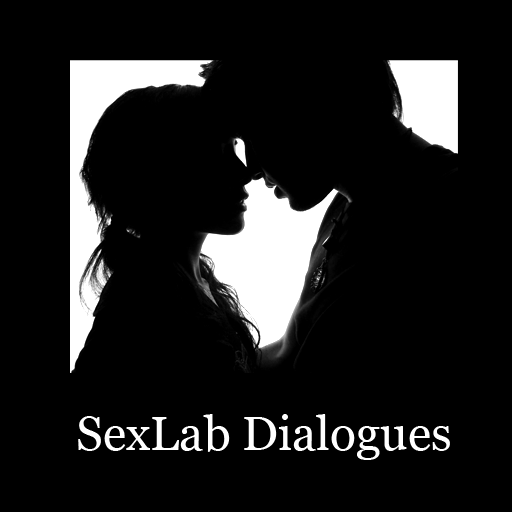
<style>
.page{position:relative;width:512px;height:512px;background:#000000}
.page>*{position:absolute;margin:0}
.t1{font:48px "Georgia";color:#ffffff}
</style>
<div class="page">
<p class="t1" style="left:78px;top:414px;width:372px;height:46px">SexLab Dialogues</p>
</div>
